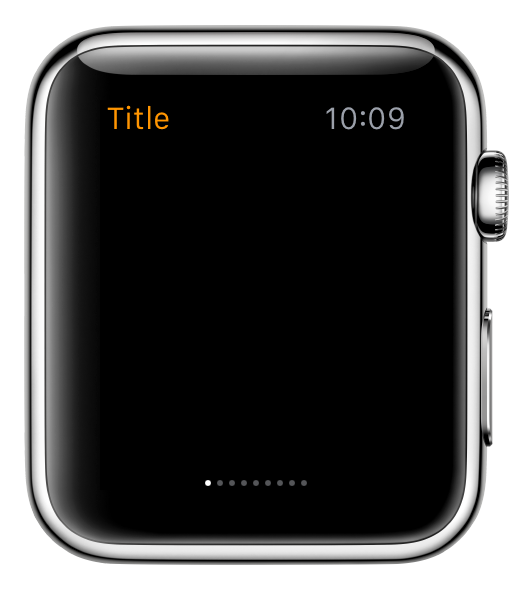
<style>
.page{position:relative;width:512px;height:590px;background:#000000}
.page>*{position:absolute;margin:0}
.t1{font:32px "SFCompactText-Regular";color:#ff9501}
.t2{font:32px "SFCompactText-Regular";color:#9ba0aa}
</style>
<div class="page">
<p class="t1" style="left:107px;top:105px;width:62px;height:25px">Title</p>
<p class="t2" style="left:326px;top:107px;width:78px;height:23px">10:09</p>
</div>
